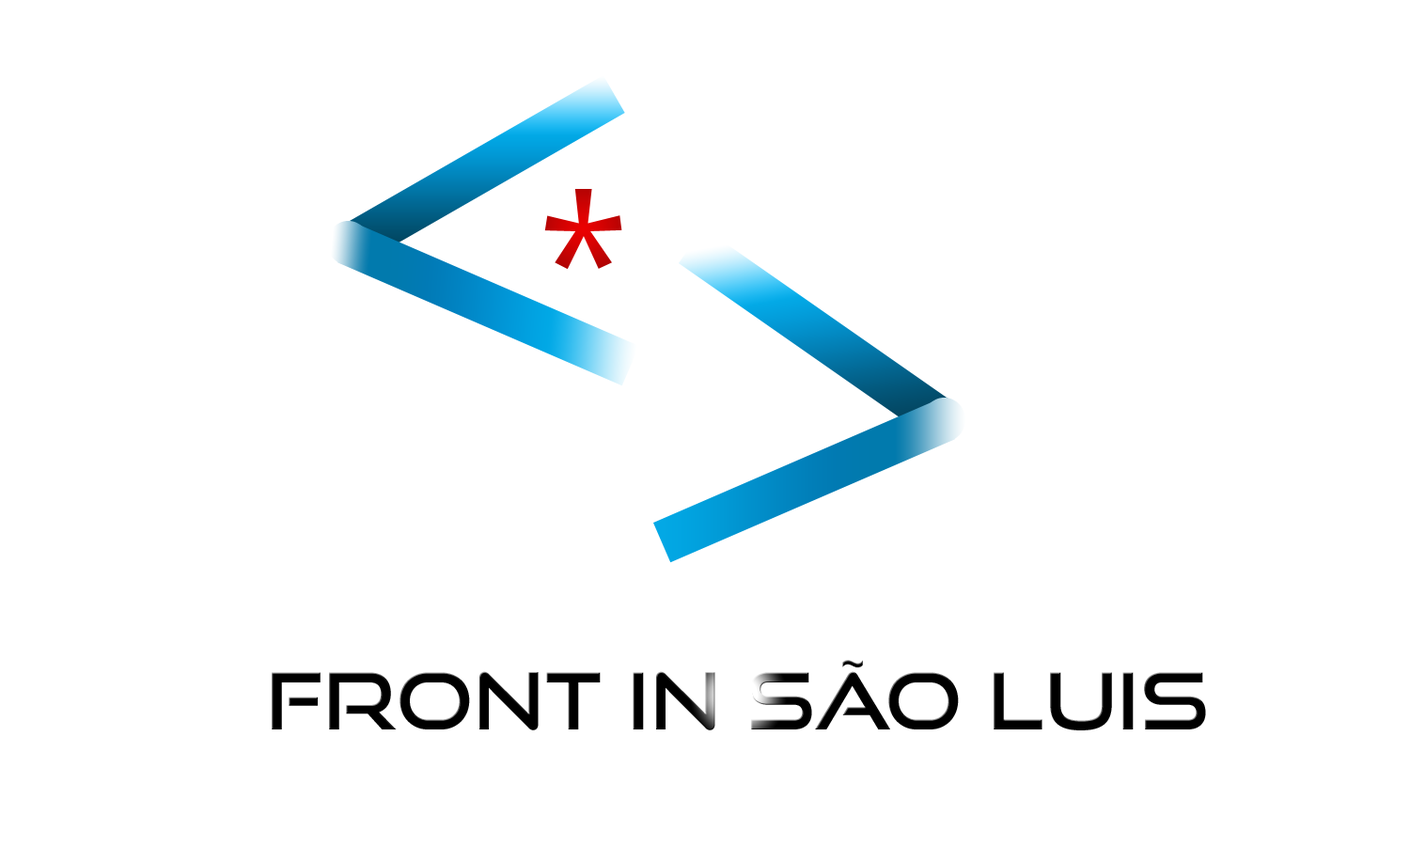
<style>
.page{position:relative;width:1410px;height:846px;background:#ffffff}
.page>*{position:absolute;margin:0}
.t1{font:78.3px "GoodTimesRg-Regular";letter-spacing:0.025em;color:#000000}
</style>
<div class="page">
<p class="t1" style="left:272px;top:660px;width:934px;height:70px">Front in São LUis</p>
</div>
